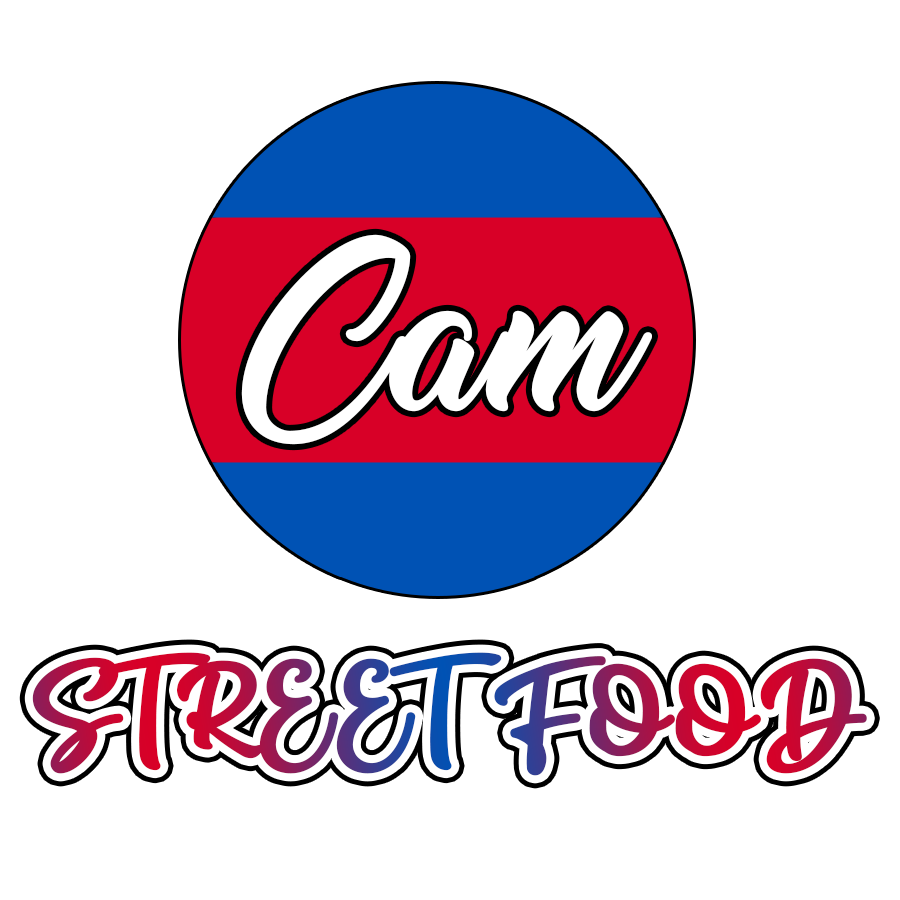
<style>
.page{position:relative;width:900px;height:900px;background:#ffffff}
.page>*{position:absolute;margin:0}
.t1{font:160px "ThinkingOfBettyLight";letter-spacing:0.02em;color:#ffffff;font-weight:bold;scale:0.96 1}
.t2{font:175px "Winter-Christmas";letter-spacing:0.02em;font-weight:bold;scale:0.96 1}
</style>
<div class="page">
<p class="t1" style="left:241px;top:234px;width:411px;height:211px">Cam</p>
<p class="t2" style="left:32px;top:652px;width:835px;height:124px">STREET FOOD</p>
</div>
